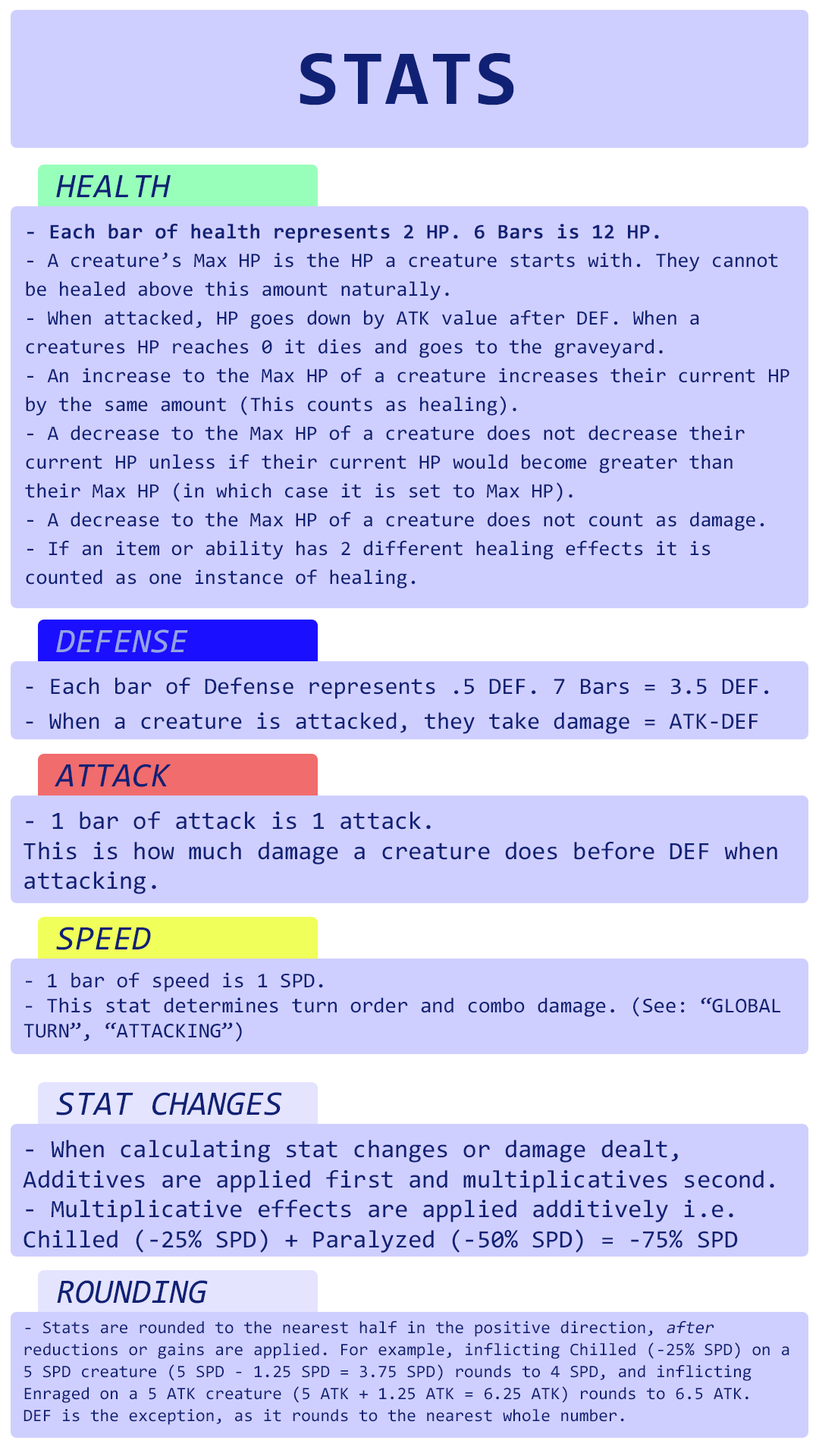
<style>
.page{position:relative;width:819px;height:1456px;background:#cfcfff}
.page>*{position:absolute;margin:0}
.t1{font:78.3px "Consolas-Bold";letter-spacing:0.02em;color:#102175}
.t2{font:34.3px "Consolas-Italic";color:#102175}
.t3{font:20.5px/28.8px "Consolas";color:#102175}
.t4{font:20.5px/28.8px "Consolas";color:#102175;font-weight:bold}
.t5{font:34.3px "Consolas-Italic";color:#95a2e2}
.t6{font:23.5px/34.9px "Consolas";color:#102175}
.t7{font:25px "Consolas";color:#102175}
.t8{font:21.2px/25px "Consolas";color:#102175}
.t9{font:17.4px/22px "Consolas";color:#102175}
.t10{font:17.4px/22px "Consolas";color:#102175;font-style:italic}
</style>
<div class="page">
<p class="t1" style="left:300px;top:53px;width:214px;height:52px">STATS</p>
<p class="t2" style="left:56px;top:175px;width:115px;height:22px">HEALTH</p>
<p class="t3" style="left:25px;top:224px;width:764px;height:364px"><span class="t4">- Each bar of health represents 2 HP. 6 Bars is 12 HP.<br></span>- A creature’s Max HP is the HP a creature starts with. They cannot be healed above this amount naturally.<br>- When attacked, HP goes down by ATK value after DEF. When a creatures HP reaches 0 it dies and goes to the graveyard.<br>- An increase to the Max HP of a creature increases their current HP by the same amount (This counts as healing).<br>- A decrease to the Max HP of a creature does not decrease their current HP unless if their current HP would become greater than their Max HP (in which case it is set to Max HP).<br>- A decrease to the Max HP of a creature does not count as damage.<br>- If an item or ability has 2 different healing effects it is counted as one instance of healing.</p>
<p class="t5" style="left:56px;top:629px;width:132px;height:24px">DEFENSE</p>
<p class="t6" style="left:26px;top:677px;width:743px;height:57px">- Each bar of Defense represents .5 DEF. 7 Bars = 3.5 DEF.<br>- When a creature is attacked, they take damage = ATK-DEF</p>
<p class="t2" style="left:55px;top:764px;width:116px;height:23px">ATTACK</p>
<p class="t7" style="left:24px;top:811px;width:753px;height:83px">- 1 bar of attack is 1 attack.<br>This is how much damage a creature does before DEF when attacking.</p>
<p class="t2" style="left:56px;top:927px;width:95px;height:23px">SPEED</p>
<p class="t8" style="left:24px;top:972px;width:756px;height:70px">- 1 bar of speed is 1 SPD.<br>- This stat determines turn order and combo damage. (See: “GLOBAL TURN”, “ATTACKING”)</p>
<p class="t2" style="left:56px;top:1092px;width:226px;height:23px">STAT CHANGES</p>
<p class="t7" style="left:23px;top:1140px;width:751px;height:113px">- When calculating stat changes or damage dealt, Additives are applied first and multiplicatives second.<br>- Multiplicative effects are applied additively i.e. Chilled (-25% SPD) + Paralyzed (-50% SPD) = -75% SPD</p>
<p class="t2" style="left:57px;top:1280px;width:151px;height:24px">ROUNDING</p>
<p class="t9" style="left:24px;top:1321px;width:765px;height:104px">- Stats are rounded to the nearest half in the positive direction, <span class="t10">after</span> reductions or gains are applied. For example, inflicting Chilled (-25% SPD) on a 5 SPD creature (5 SPD - 1.25 SPD = 3.75 SPD) rounds to 4 SPD, and inflicting Enraged on a 5 ATK creature (5 ATK + 1.25 ATK = 6.25 ATK) rounds to 6.5 ATK.<br>DEF is the exception, as it rounds to the nearest whole number.</p>
</div>
